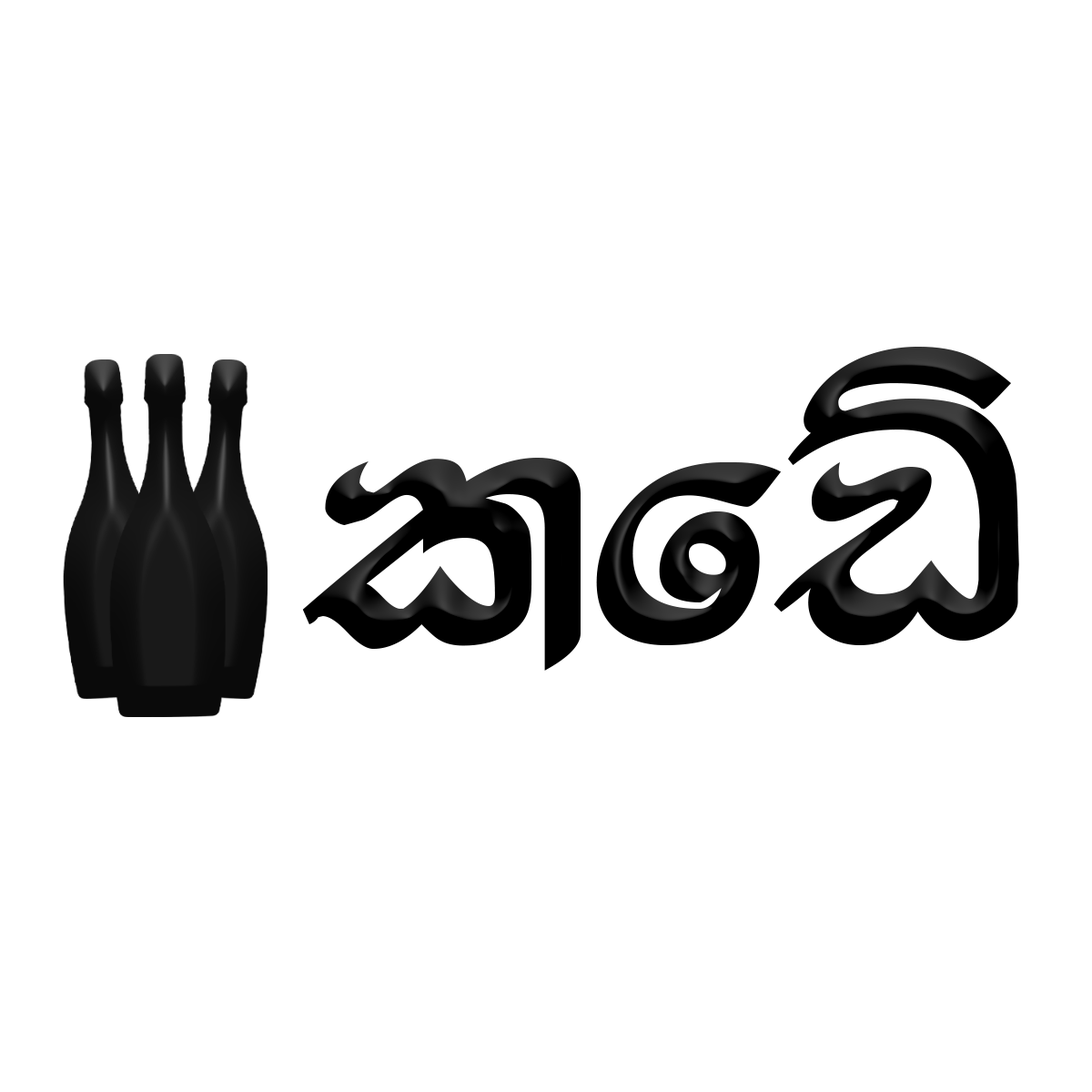
<style>
.page{position:relative;width:1092px;height:1092px;background:#ffffff}
.page>*{position:absolute;margin:0}
.t1{font:380.4px "SARA-BARON";color:#000000}
</style>
<div class="page">
<p class="t1" style="left:302px;top:347px;width:717px;height:324px">lfâ</p>
</div>
